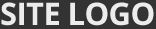
<style>
.page{position:relative;width:156px;height:29px;background:#333333}
.page>*{position:absolute;margin:0}
.t1{font:31px "OpenSans-Bold";letter-spacing:-0.02em;color:#ececec;text-transform:uppercase}
</style>
<div class="page">
<p class="t1" style="left:1px;top:2px;width:153px;height:24px">site logo</p>
</div>
